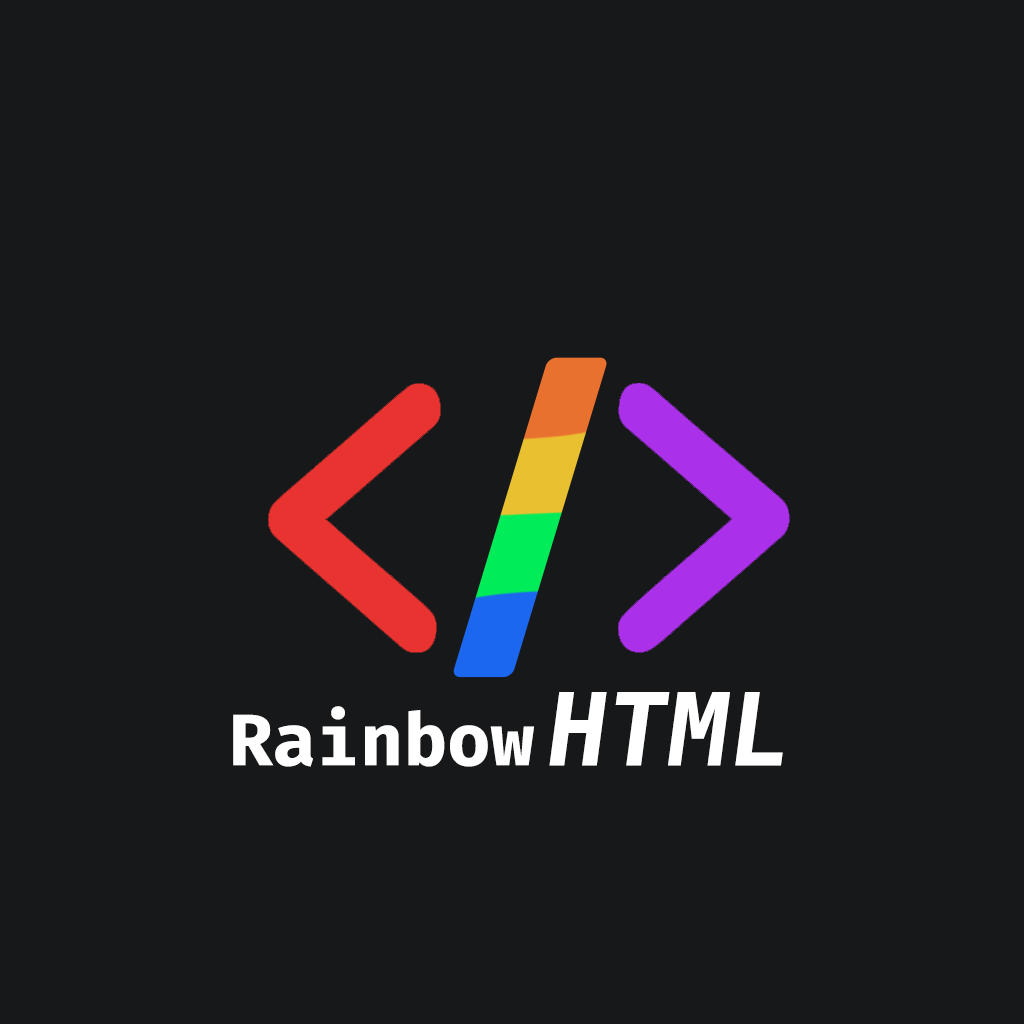
<style>
.page{position:relative;width:1024px;height:1024px;background:#17181a}
.page>*{position:absolute;margin:0}
.t1{font:101.4px "Hack-Bold";color:#ffffff}
.t2{font:70.8px "FiraCode-Bold";color:#ffffff}
</style>
<div class="page">
<p class="t1" style="left:549px;top:692px;width:234px;height:74px">HTML</p>
<p class="t2" style="left:233px;top:706px;width:301px;height:61px">Rainbow</p>
</div>
